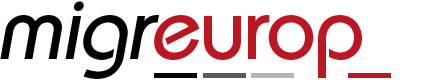
<style>
.page{position:relative;width:433px;height:80px;background:#ffffff}
.page>*{position:absolute;margin:0}
.t1{font:91.4px "BauhausStd-Medium";letter-spacing:-0.01em;color:#000000}
.t2{font:91.4px "BauhausStd-Medium";letter-spacing:-0.01em;color:#bb1622}
.t3{font:90px "BauhausStd-Medium";letter-spacing:-0.01em}
</style>
<div class="page">
<p class="t1" style="left:0px;top:1px;width:200px;height:78px">migr<span class="t2">e</span></p>
<p class="t3" style="left:5px;top:1px;width:357px;height:78px">migreurop</p>
</div>
